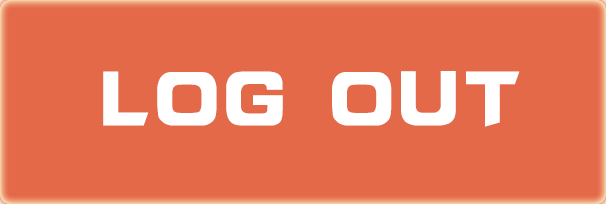
<style>
.page{position:relative;width:606px;height:204px;background:#e46948}
.page>*{position:absolute;margin:0}
.t1{font:80px "HYk2gj";color:#ffffff}
</style>
<div class="page">
<p class="t1" style="left:103px;top:71px;width:417px;height:56px">LOG OUT</p>
</div>
